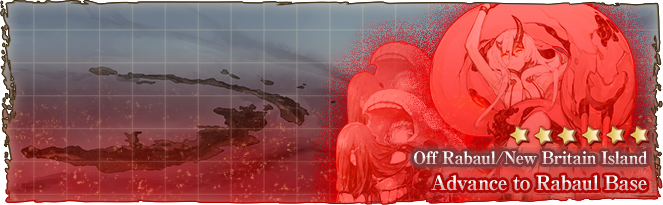
<style>
.page{position:relative;width:663px;height:205px}
.page>*{position:absolute;margin:0}
.t1{font:17px "RyuminPro-ExBold";letter-spacing:-0.04em}
.t2{font:20px "RyuminPro-ExBold";letter-spacing:-0.04em}
</style>
<div class="page">
<p class="t1" style="left:414px;top:151px;width:233px;height:14px">Off Rabaul/New Britain Island</p>
<p class="t2" style="left:431px;top:175px;width:216px;height:16px">Advance to Rabaul Base</p>
</div>
